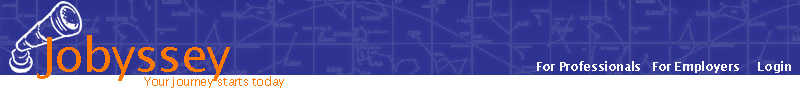
<style>
.page{position:relative;width:800px;height:100px;background:#ffffff}
.page>*{position:absolute;margin:0}
.t1{font:48px "LucidaSans";letter-spacing:-0.03em;color:#ff7800}
.t2{font:12px "LucidaSans-Demi";letter-spacing:-0.03em;color:#ffffff}
.t3{font:12px "LucidaSans";letter-spacing:-0.03em;color:#ff7800}
</style>
<div class="page">
<p class="t1" style="left:37px;top:35px;width:193px;height:46px">Jobyssey</p>
<p class="t2" style="left:537px;top:61px;width:254px;height:12px">For Professionals   For Employers     Login</p>
<p class="t3" style="left:144px;top:76px;width:140px;height:12px">Your journey starts today</p>
</div>
